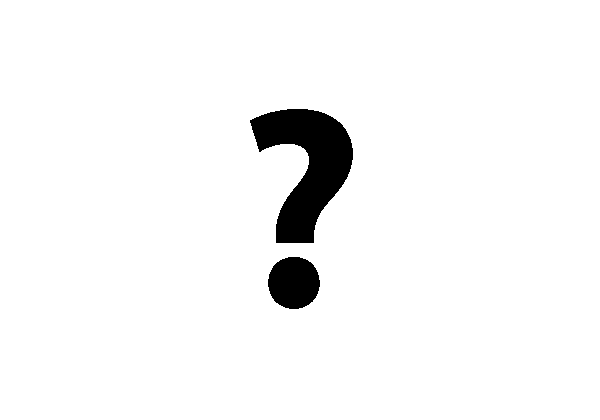
<style>
.page{position:relative;width:600px;height:420px;background:#ffffff}
.page>*{position:absolute;margin:0}
.t1{font:288px "MyriadPro-Bold";letter-spacing:-0.032em;color:#000000}
</style>
<div class="page">
<p class="t1" style="left:250px;top:109px;width:103px;height:200px">?</p>
</div>
